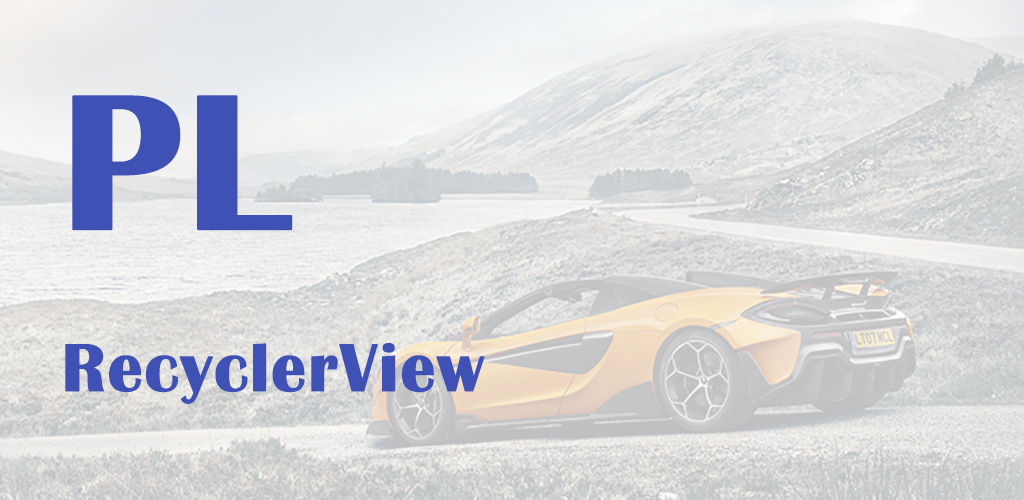
<style>
.page{position:relative;width:1024px;height:500px}
.page>*{position:absolute;margin:0}
.t1{font:70px/270px "BritannicBold";color:#3f51b5;font-weight:bold}
.t2{font:200px/270px "BritannicBold";color:#3f51b5;text-transform:uppercase;font-weight:bold}
</style>
<div class="page">
<p class="t1" style="left:65px;top:95px;width:420px;height:309px"><span class="t2">PL<br></span>RecyclerView</p>
</div>
